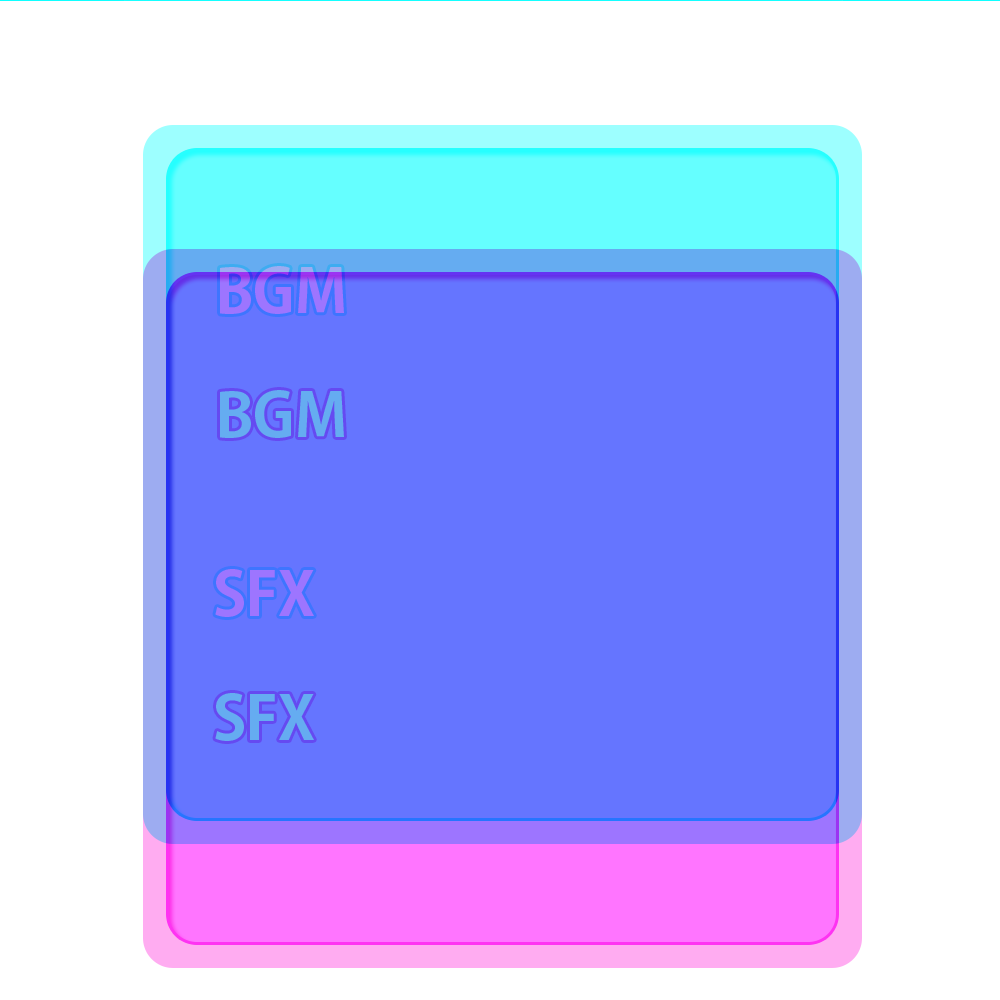
<style>
.page{position:relative;width:1000px;height:1000px;background:#ffffff}
.page>*{position:absolute;margin:0}
.t1{font:60px "AdobeGothicStd-Bold"}
.t2{font:60px "AdobeGothicStd-Bold";color:#9d75ff}
</style>
<div class="page">
<p class="t1" style="left:220px;top:265px;width:124px;height:48px">BGM</p>
<p class="t2" style="left:215px;top:568px;width:99px;height:48px">SFX</p>
</div>
